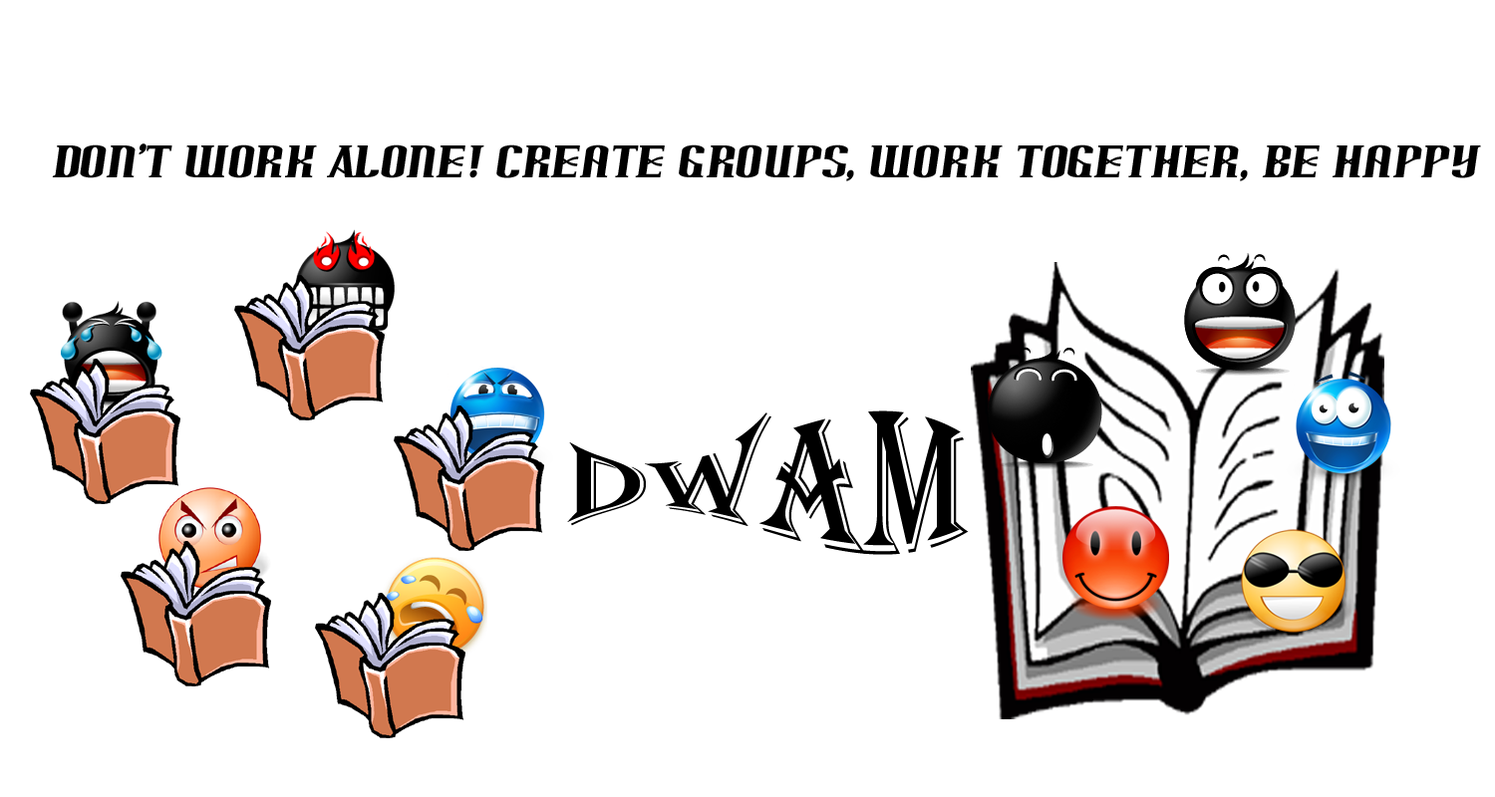
<style>
.page{position:relative;width:1495px;height:797px;background:#ffffff}
.page>*{position:absolute;margin:0}
.t1{font:39.9px "Arnprior";color:#000000}
.t2{font:139.6px "Algerian";color:#000000}
</style>
<div class="page">
<p class="t1" style="left:52px;top:144px;width:1429px;height:37px">Don’t work Alone! Create groups, work together, be happy</p>
<p class="t2" style="left:567px;top:411px;width:402px;height:144px">DWAM</p>
</div>
